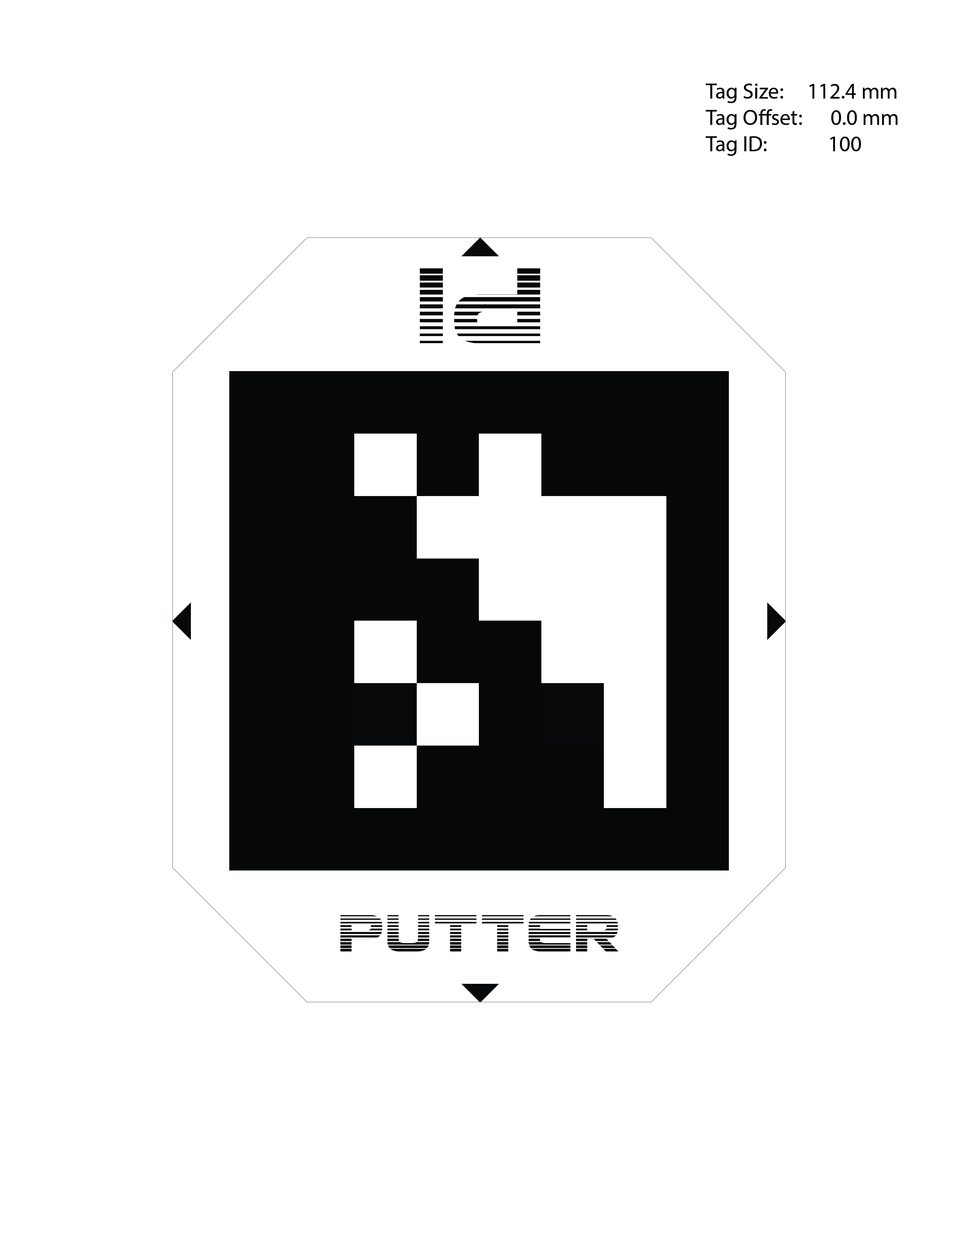
<style>
.page{position:relative;width:960px;height:1242px;background:#ffffff}
.page>*{position:absolute;margin:0}
.t1{font:22px "MyriadPro-Regular";color:#060808}
.t2{font:129.3px "UsuziGradient";color:#060808}
.t3{font:62.7px "UsuziGradient";color:#060808}
</style>
<div class="page">
<p class="t1" style="left:705px;top:84px;width:192px;height:72px">Tag Size:     112.4 mm<br>    Tag Offset:      0.0 mm<br>    Tag ID:             100</p>
<p class="t2" style="left:420px;top:268px;width:120px;height:75px;rotate:180deg">Pi</p>
<p class="t3" style="left:340px;top:915px;width:278px;height:37px">Putter</p>
</div>
